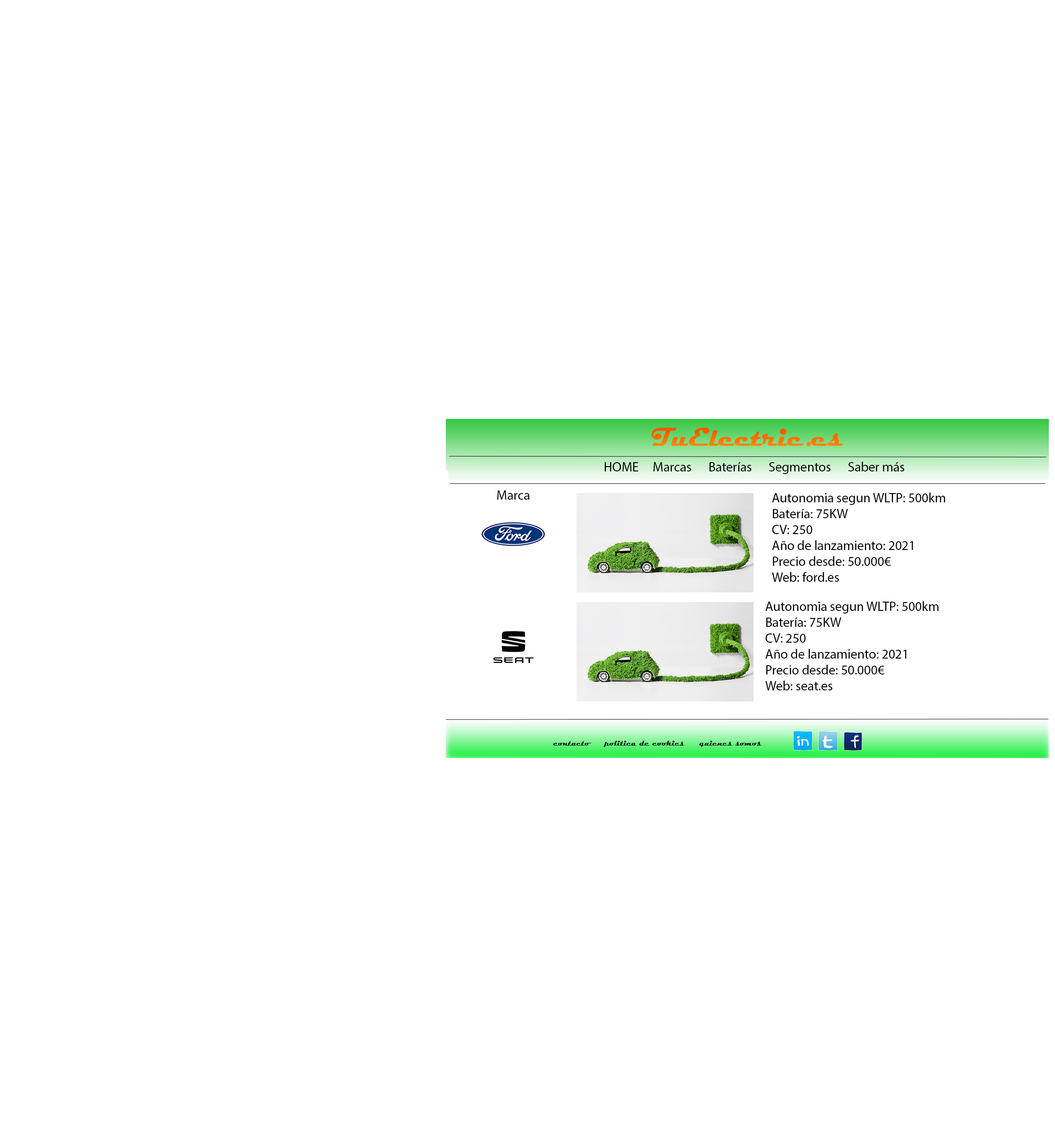
<style>
.page{position:relative;width:1055px;height:1130px;background:#ffffff}
.page>*{position:absolute;margin:0}
.t1{font:26.5px "Magneto-Bold";color:#ff7800}
.t2{font:13.2px "MyriadPro-Regular";color:#000000}
.t3{font:7.9px "Magneto-Bold";color:#021002}
</style>
<div class="page">
<p class="t1" style="left:652px;top:428px;width:192px;height:18px">TuElectric.es</p>
<p class="t2" style="left:605px;top:462px;width:300px;height:12px">HOME     Marcas      Baterías      Segmentos      Saber más</p>
<p class="t2" style="left:497px;top:490px;width:33px;height:10px">Marca</p>
<p class="t2" style="left:772px;top:493px;width:173px;height:89px">Autonomia segun WLTP: 500km<br>Batería: 75KW<br>CV: 250<br>Año de lanzamiento: 2021<br>Precio desde: 50.000€<br>Web: ford.es</p>
<p class="t2" style="left:766px;top:601px;width:173px;height:89px">Autonomia segun WLTP: 500km<br>Batería: 75KW<br>CV: 250<br>Año de lanzamiento: 2021<br>Precio desde: 50.000€<br>Web: seat.es</p>
<p class="t3" style="left:553px;top:741px;width:209px;height:6px">contacto     politica de cookies     quienes somos</p>
</div>
